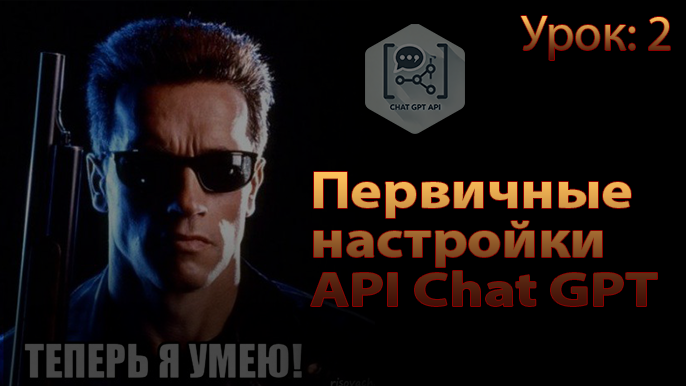
<style>
.page{position:relative;width:686px;height:386px;background:#000000}
.page>*{position:absolute;margin:0}
.t1{font:50px "MyriadPro-Regular"}
.t2{font:52.2px/49.3px "MyriadPro-Bold";scale:1.15 1}
.t3{font:48.6px/49.3px "MyriadPro-Bold";scale:1.23 1}
</style>
<div class="page">
<p class="t1" style="left:521px;top:16px;width:149px;height:44px">Урок: 2</p>
<p class="t2" style="left:311px;top:172px;width:346px;height:134px">Первичные<br>настройки<br><span class="t3">API Chat GPT</span></p>
</div>
